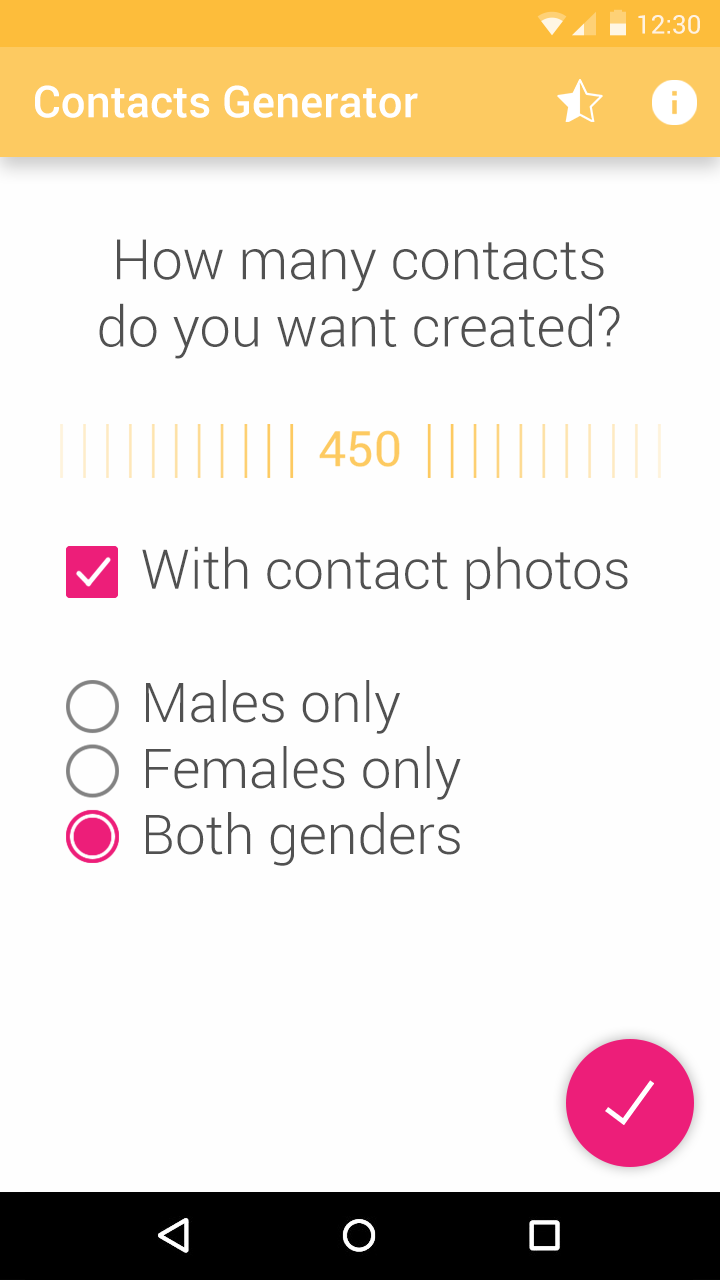
<style>
.page{position:relative;width:720px;height:1280px;background:#fefefe}
.page>*{position:absolute;margin:0}
.t1{font:44px "Roboto-Medium";color:#ffffff}
.t2{font:56px "Roboto-Light";color:#515151}
.t3{font:55px "Roboto-Light";color:#515151}
</style>
<div class="page">
<p class="t1" style="left:35px;top:85px;width:383px;height:33px">Contacts Generator</p>
<p class="t2" style="left:99px;top:239px;width:521px;height:120px;text-align:center">How many contacts<br>do you want created?</p>
<p class="t3" style="left:142px;top:546px;width:486px;height:320px">With contact photos<br><br>Males only<br>Females only<br>Both genders</p>
</div>
